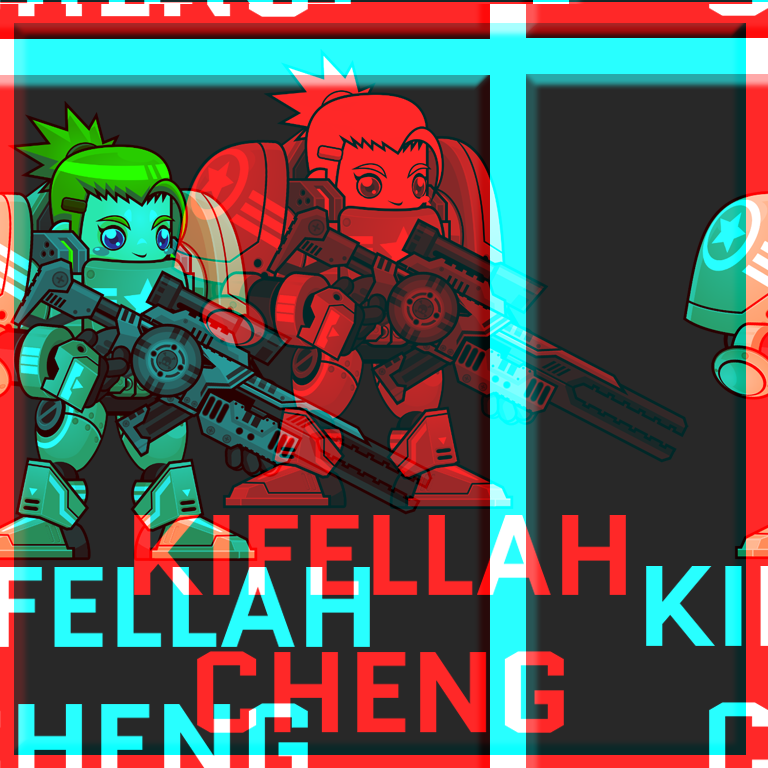
<style>
.page{position:relative;width:768px;height:768px;background:#282828}
.page>*{position:absolute;margin:0}
.t1{font:114.4px "Quantico-Bold";color:#ff2828}
</style>
<div class="page">
<p class="t1" style="left:134px;top:513px;width:492px;height:218px;text-align:center">KIFELLAH<br>CHENG</p>
</div>
